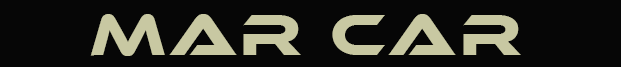
<style>
.page{position:relative;width:621px;height:67px;background:#060606}
.page>*{position:absolute;margin:0}
.t1{font:60px "EthnocentricRg-Regular";letter-spacing:0.05em;color:#c8c8a2}
</style>
<div class="page">
<p class="t1" style="left:90px;top:14px;width:431px;height:42px">mar car</p>
</div>
